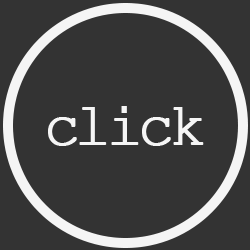
<style>
.page{position:relative;width:250px;height:250px;background:#333333}
.page>*{position:absolute;margin:0}
.t1{font:60px "CourierNewPSMT";letter-spacing:-0.105em;color:#f5f5f5;font-weight:bold}
</style>
<div class="page">
<p class="t1" style="left:48px;top:106px;width:156px;height:40px">click</p>
</div>
